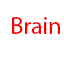
<style>
.page{position:relative;width:64px;height:64px;background:#ffffff}
.page>*{position:absolute;margin:0}
.t1{font:12px "MyriadPro-Regular";color:#f40101}
</style>
<div class="page">
<p class="t1" style="left:12px;top:17px;width:48px;height:17px">Brain</p>
</div>
